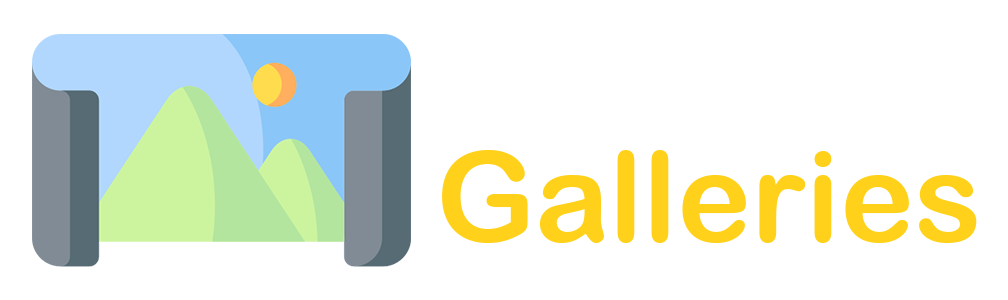
<style>
.page{position:relative;width:1008px;height:300px;background:#ffffff}
.page>*{position:absolute;margin:0}
.t1{font:125px "ArialRoundedMTBold";color:#ffd11a}
</style>
<div class="page">
<p class="t1" style="left:442px;top:150px;width:535px;height:93px">Galleries</p>
</div>
